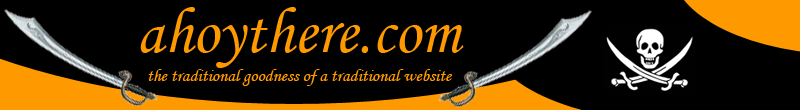
<style>
.page{position:relative;width:800px;height:110px;background:#000000}
.page>*{position:absolute;margin:0}
.t1{font:65px "MonotypeCorsiva";color:#ff9900}
.t2{font:18px "MonotypeCorsiva";color:#ff9900}
</style>
<div class="page">
<p class="t1" style="left:140px;top:7px;width:324px;height:61px">ahoythere.com</p>
<p class="t2" style="left:148px;top:69px;width:304px;height:17px">the traditional goodness of a traditional website</p>
</div>
